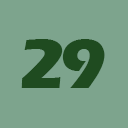
<style>
.page{position:relative;width:128px;height:128px;background:#7da48d}
.page>*{position:absolute;margin:0}
.t1{font:72px "ErasITC-Bold";letter-spacing:-0.08em;color:#1f4b20}
</style>
<div class="page">
<p class="t1" style="left:21px;top:39px;width:84px;height:49px">29</p>
</div>
